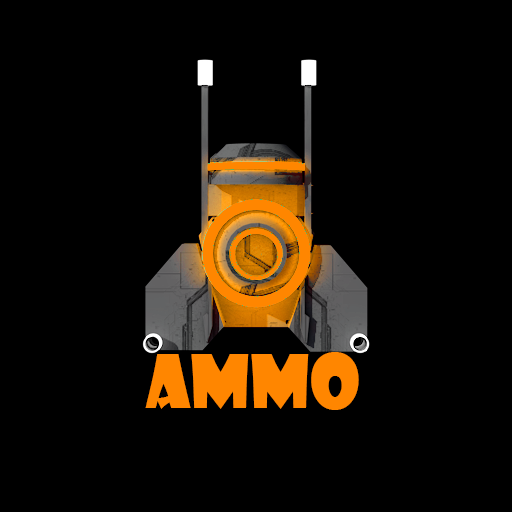
<style>
.page{position:relative;width:512px;height:512px;background:#000000}
.page>*{position:absolute;margin:0}
.t1{font:72px "ShowcardGothic-Reg";color:#ff8600}
</style>
<div class="page">
<p class="t1" style="left:145px;top:352px;width:214px;height:58px">AMMO</p>
</div>
